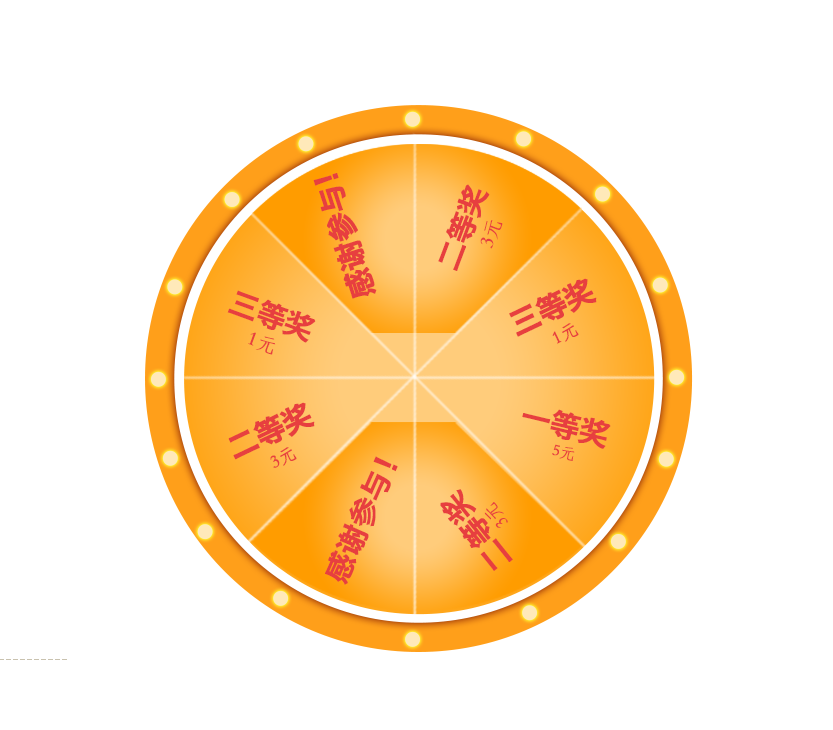
<style>
.page{position:relative;width:833px;height:730px;background:#ffffff}
.page>*{position:absolute;margin:0}
.t1{font:29.8px "HiraginoSansGB-W6";letter-spacing:-0.025em;color:#e73f3f;font-weight:bold}
.t2{font:29px/25px "HiraginoSansGB-W6";letter-spacing:-0.025em;color:#e73f3f;font-weight:bold}
.t3{font:20px/25px "STFangsong";color:#e73f3f;font-weight:bold}
.t4{font:29.8px/37.3px "HiraginoSansGB-W6";letter-spacing:-0.025em;color:#e73f3f;font-weight:bold}
.t5{font:18px/25px "STFangsong";color:#e73f3f;font-weight:bold}
.t6{font:16px/20px "STFangsong";color:#e73f3f;font-weight:bold}
.t7{font:30px/20px "HiraginoSansGB-W6";color:#e73f3f;font-weight:bold}
.t8{font:18px/20px "STFangsong";color:#e73f3f;font-weight:bold}
</style>
<div class="page">
<p class="t1" style="left:313px;top:173px;width:64px;height:126px;rotate:-108deg">感谢参与!</p>
<p class="t2" style="left:438px;top:184px;width:65px;height:87px;text-align:center;rotate:-69deg">二等奖  <br><span class="t3">3元</span></p>
<p class="t4" style="left:509px;top:278px;width:88px;height:66px;text-align:center;rotate:-26deg">三等奖  <br><span class="t5">1元</span></p>
<p class="t2" style="left:227px;top:290px;width:89px;height:65px;text-align:center;rotate:20deg">三等奖  <br><span class="t3">1元</span></p>
<p class="t4" style="left:228px;top:402px;width:87px;height:66px;text-align:center;rotate:-26deg">二等奖  <br><span class="t5">3元</span></p>
<p class="t4" style="left:522px;top:409px;width:89px;height:52px;text-align:center;rotate:13deg">一等奖  <br><span class="t6">5元</span></p>
<p class="t1" style="left:325px;top:456px;width:73px;height:129px;rotate:-66deg">感谢参与！</p>
<p class="t7" style="left:440px;top:489px;width:73px;height:82px;text-align:center;rotate:-129deg">二等奖<br><span class="t8">3元</span></p>
</div>
